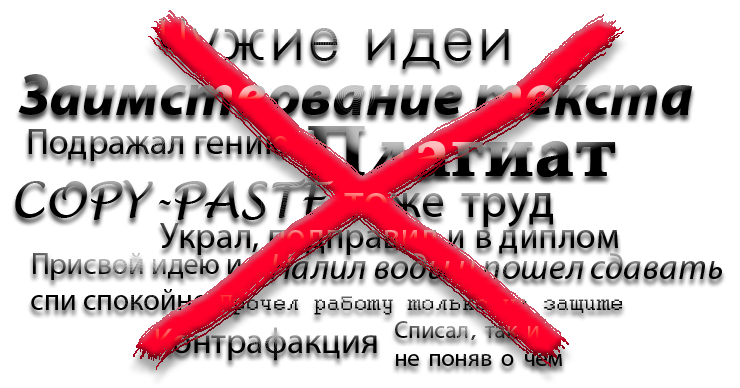
<style>
.page{position:relative;width:740px;height:388px;background:#ffffff}
.page>*{position:absolute;margin:0}
.t1{font:60px "Dotum"}
.t2{font:60px "MyriadPro-BoldIt"}
.t3{font:72px "PalatinoLinotype-Bold";font-weight:bold}
.t4{font:36px "MyriadPro-Regular"}
.t5{font:30px "MyriadPro-Regular"}
.t6{font:36px "MyriadPro-It"}
.t7{font:24px "Courier"}
.t8{font:24px "MyriadPro-Regular"}
.t9{font:24px "Magneto-Bold"}
</style>
<div class="page">
<p class="t1" style="left:160px;top:18px;width:349px;height:51px">Чужие идеи</p>
<p class="t2" style="left:18px;top:74px;width:675px;height:41px">Заимствование текста</p>
<p class="t3" style="left:308px;top:126px;width:308px;height:51px">Плагиат</p>
<p class="t4" style="left:28px;top:129px;width:260px;height:32px">Подражал гению</p>
<p class="t4" style="left:160px;top:223px;width:458px;height:32px">Украл, подправил и в диплом</p>
<p class="t5" style="left:31px;top:253px;width:210px;height:57px">Присвой идею и <br>спи спокойно</p>
<p class="t6" style="left:270px;top:253px;width:452px;height:26px">Налил воды и пошел сдавать</p>
<p class="t7" style="left:220px;top:295px;width:402px;height:20px">Прочел работу только на защите</p>
<p class="t4" style="left:155px;top:327px;width:222px;height:34px">Контрафакция</p>
<p class="t8" style="left:395px;top:321px;width:167px;height:45px">Списал<span class="t9">, </span>так и <br>не поняв о чем</p>
</div>
